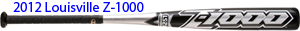
<style>
.page{position:relative;width:300px;height:31px;background:#ffffff}
.page>*{position:absolute;margin:0}
.t1{font:14px "MyriadPro-Regular";color:#0000ff}
</style>
<div class="page">
<p class="t1" style="left:13px;top:2px;width:131px;height:10px">2012 Louisville Z-1000</p>
</div>
